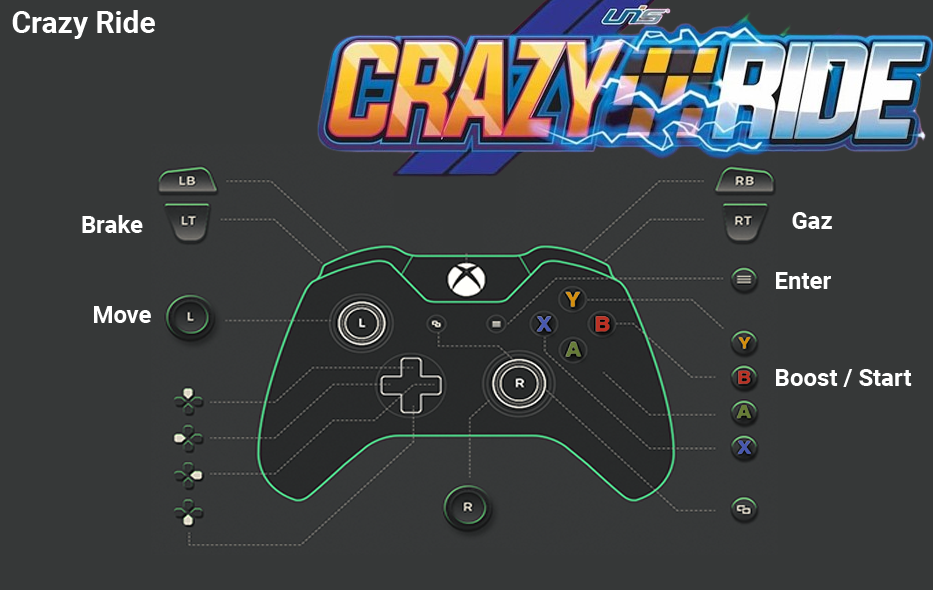
<style>
.page{position:relative;width:933px;height:590px;background:#363838}
.page>*{position:absolute;margin:0}
.t1{font:30px "Roboto-Bold";color:#ffffff}
.t2{font:24px "Roboto-Bold";color:#ffffff}
</style>
<div class="page">
<p class="t1" style="left:12px;top:10px;width:143px;height:29px">Crazy Ride</p>
<p class="t2" style="left:82px;top:215px;width:61px;height:18px">Brake</p>
<p class="t2" style="left:792px;top:212px;width:40px;height:17px">Gaz</p>
<p class="t2" style="left:776px;top:272px;width:55px;height:17px">Enter</p>
<p class="t2" style="left:94px;top:306px;width:57px;height:17px">Move</p>
<p class="t2" style="left:776px;top:369px;width:136px;height:18px">Boost / Start</p>
</div>
